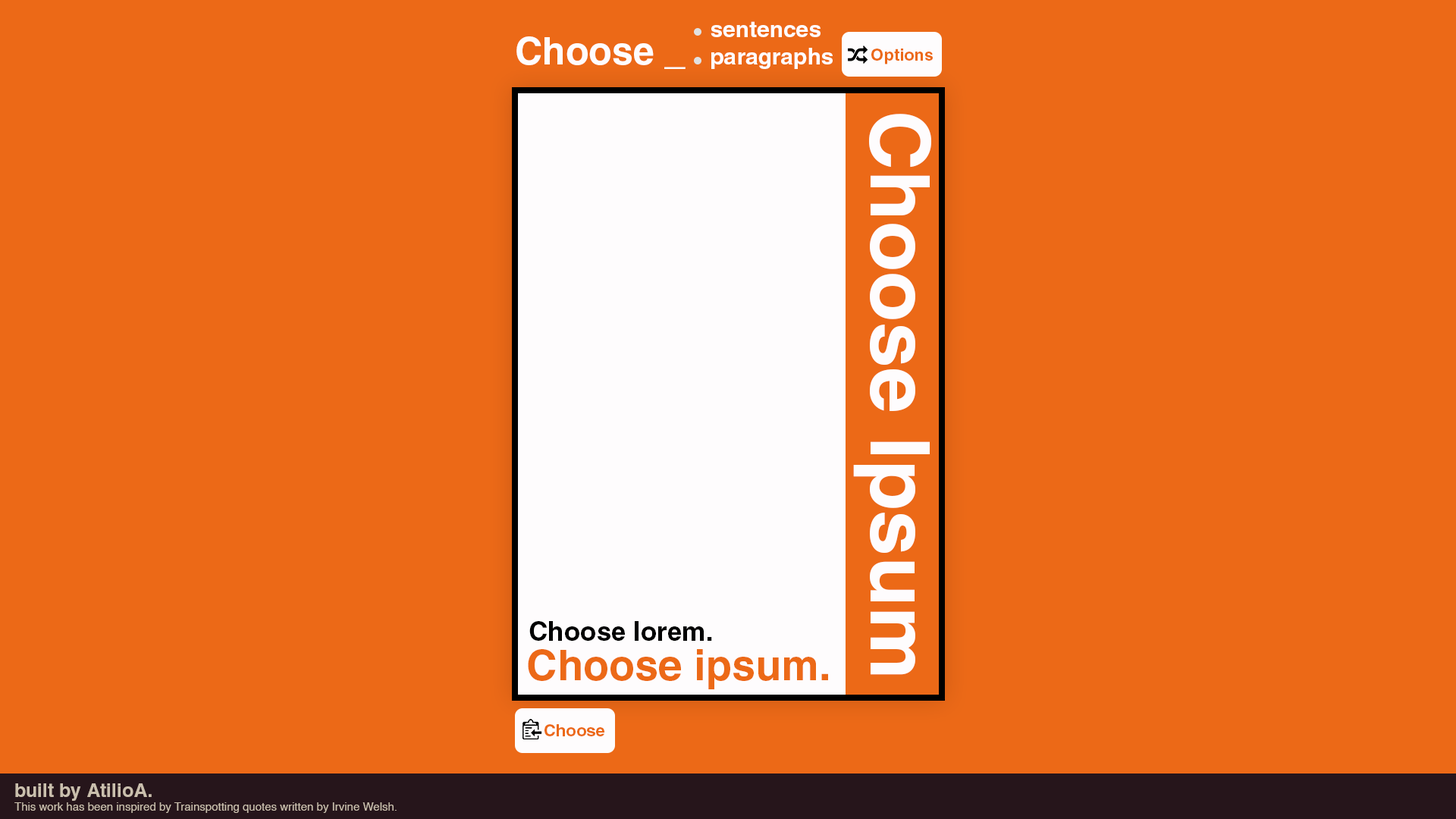
<style>
.page{position:relative;width:1456px;height:819px;background:#ec6917}
.page>*{position:absolute;margin:0}
.t1{font:22.7px "Helvetica-Bold";color:#fefcfd}
.t2{font:37.9px "Helvetica-Bold";color:#fefcfd}
.t3{font:16.7px "Helvetica-Bold";color:#ec6917}
.t4{font:82.7px "Helvetica-Bold";color:#fefcfd}
.t5{font:26.5px "Helvetica-Bold";color:#000000}
.t6{font:42.5px "Helvetica-Bold";color:#ec6917}
.t7{font:11.4px "Helvetica";color:#cabfad}
.t8{font:19px "Helvetica-Bold";color:#cabfad}
</style>
<div class="page">
<p class="t1" style="left:711px;top:21px;width:122px;height:48px">sentences<br>paragraphs</p>
<p class="t2" style="left:516px;top:36px;width:170px;height:33px">Choose _</p>
<p class="t3" style="left:871px;top:49px;width:62px;height:15px">Options</p>
<p class="t4" style="left:853px;top:114px;width:79px;height:561px">Choose Ipsum</p>
<p class="t5" style="left:529px;top:621px;width:183px;height:20px">Choose lorem.</p>
<p class="t6" style="left:528px;top:649px;width:300px;height:40px">Choose ipsum.</p>
<p class="t3" style="left:544px;top:724px;width:60px;height:12px">Choose</p>
<p class="t7" style="left:14px;top:783px;width:383px;height:30px"><span class="t8">built by AtilioA.<br></span>This work has been inspired by Trainspotting quotes written by Irvine Welsh.</p>
</div>
